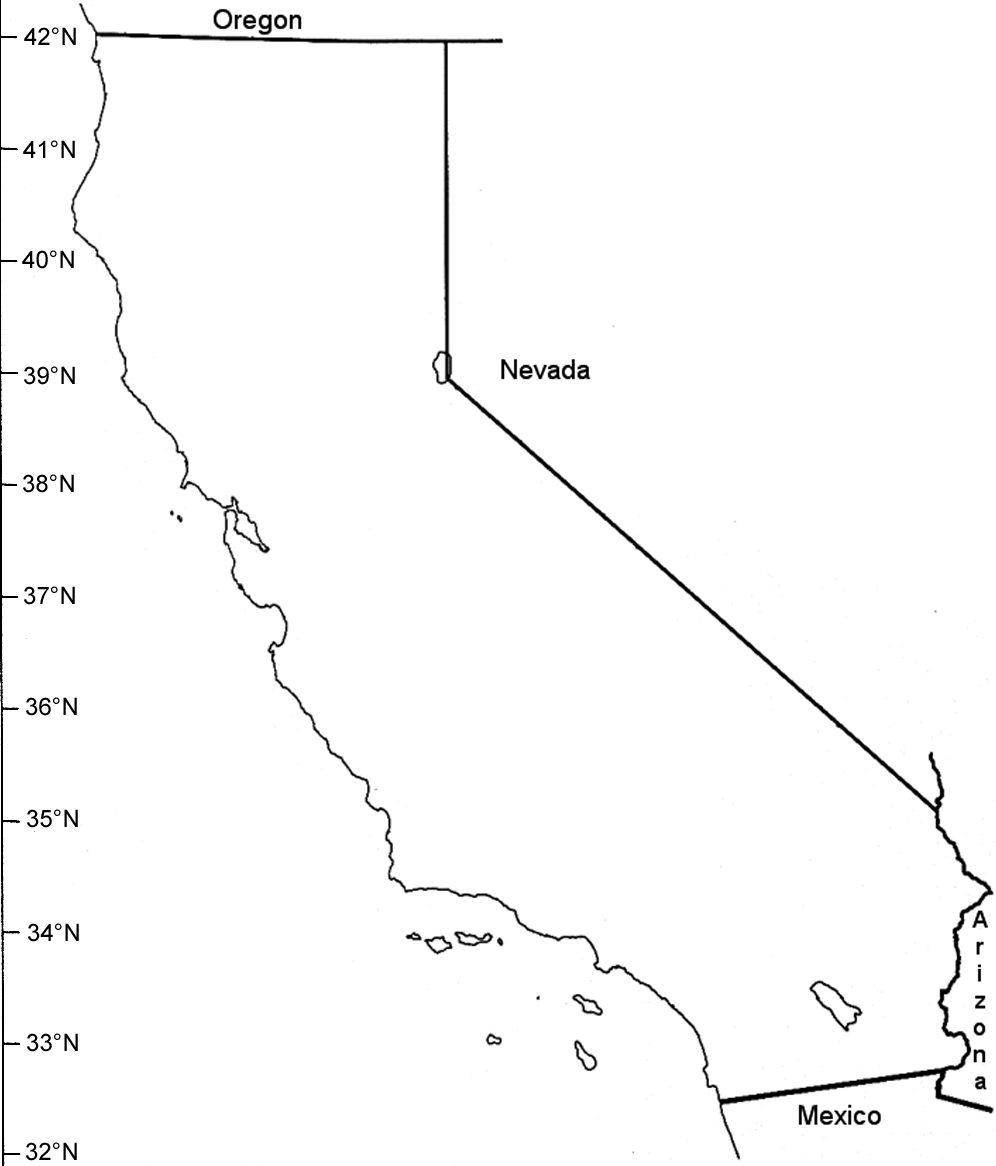
<style>
.page{position:relative;width:996px;height:1166px;background:#ffffff}
.page>*{position:absolute;margin:0}
.t1{font:24px "ArialMT";color:#000000}
</style>
<div class="page">
<p class="t1" style="left:24px;top:27px;width:52px;height:18px">42°N</p>
<p class="t1" style="left:23px;top:140px;width:52px;height:18px">41°N</p>
<p class="t1" style="left:22px;top:250px;width:52px;height:19px">40°N</p>
<p class="t1" style="left:24px;top:366px;width:51px;height:19px">39°N</p>
<p class="t1" style="left:23px;top:474px;width:51px;height:19px">38°N</p>
<p class="t1" style="left:24px;top:586px;width:51px;height:19px">37°N</p>
<p class="t1" style="left:26px;top:697px;width:51px;height:19px">36°N</p>
<p class="t1" style="left:27px;top:809px;width:51px;height:19px">35°N</p>
<p class="t1" style="left:28px;top:923px;width:51px;height:19px">34°N</p>
<p class="t1" style="left:27px;top:1033px;width:51px;height:19px">33°N</p>
<p class="t1" style="left:26px;top:1142px;width:51px;height:19px">32°N</p>
</div>
